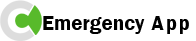
<style>
.page{position:relative;width:196px;height:41px;background:#ffffff}
.page>*{position:absolute;margin:0}
.t1{font:21px "FranklinGothic-Demi";color:#000000}
.t2{font:21px "FranklinGothic-Demi";letter-spacing:0.1em;color:#000000;scale:0.96 1}
</style>
<div class="page">
<p class="t1" style="left:43px;top:16px;width:146px;height:18px">Emergency <span class="t2">App</span></p>
</div>
